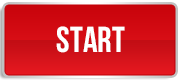
<style>
.page{position:relative;width:180px;height:80px}
.page>*{position:absolute;margin:0}
.t1{font:36px "UTM-Bebas";color:#ffffff}
</style>
<div class="page">
<p class="t1" style="left:56px;top:26px;width:69px;height:27px">start</p>
</div>
